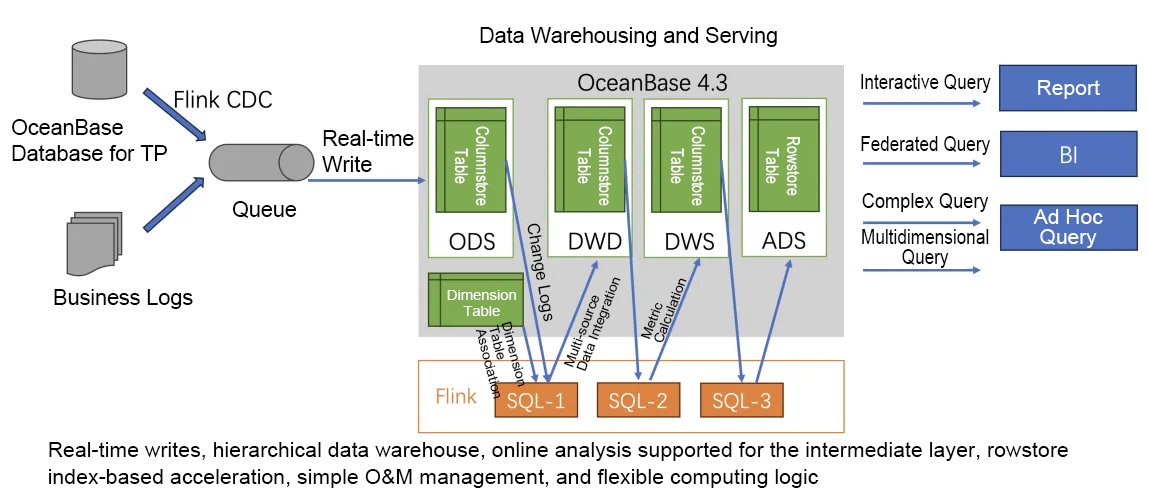
<style>
.page{position:relative;width:1149px;height:501px;background:#ffffff}
.page>*{position:absolute;margin:0}
.t1{font:21.5px "ArialMT";color:#000000}
.t2{font:21.1px "ArialMT";color:#000000;scale:0.82 1}
.t3{font:21.1px "ArialMT";color:#fefefe}
.t4{font:21.5px/26.6px "ArialMT";color:#000000}
.t5{font:17.6px/20.9px "ArialMT";color:#ffffff;scale:0.8 1}
.t6{font:21.1px "ArialMT";color:#000000;scale:0.87 1}
.t7{font:21.1px/20.2px "ArialMT";color:#fefefe}
.t8{font:16.7px "ArialMT";color:#000000}
.t9{font:21.1px/20.3px "ArialMT";color:#000000;scale:0.82 1}
.t10{font:13.3px/13.3px "ArialMT";color:#000000;scale:1.06 1}
.t11{font:13.1px/15.6px "ArialMT";color:#ffffff;scale:1.13 1}
.t12{font:21.4px/27px "ArialMT";color:#000000}
</style>
<div class="page">
<p class="t1" style="left:480px;top:27px;width:297px;height:20px">Data Warehousing and Serving</p>
<p class="t2" style="left:861px;top:74px;width:130px;height:19px">Interactive Query</p>
<p class="t3" style="left:1038px;top:80px;width:62px;height:19px">Report</p>
<p class="t4" style="left:12px;top:119px;width:155px;height:42px">OceanBase<br>Database for TP</p>
<p class="t5" style="left:454px;top:126px;width:36px;height:80px;text-align:center;rotate:90deg">Columnstore<br>Table</p>
<p class="t5" style="left:577px;top:126px;width:36px;height:80px;text-align:center;rotate:90deg">Columnstore<br>Table</p>
<p class="t5" style="left:670px;top:126px;width:36px;height:80px;text-align:center;rotate:90deg">Columnstore<br>Table</p>
<p class="t4" style="left:322px;top:130px;width:92px;height:42px">Real-time<br>Write</p>
<p class="t5" style="left:765px;top:137px;width:35px;height:59px;text-align:center;rotate:90deg">Rowstore<br>Table</p>
<p class="t2" style="left:861px;top:136px;width:129px;height:19px">Federated Query</p>
<p class="t6" style="left:862px;top:193px;width:127px;height:19px">Complex Query</p>
<p class="t1" style="left:232px;top:201px;width:65px;height:17px">Queue</p>
<p class="t7" style="left:1033px;top:209px;width:70px;height:39px;text-align:center">Ad Hoc<br>Query</p>
<p class="t8" style="left:527px;top:223px;width:26px;height:99px;rotate:80deg">Change Logs</p>
<p class="t9" style="left:862px;top:229px;width:127px;height:39px;text-align:center">Multidimensional<br>Query</p>
<p class="t10" style="left:563px;top:277px;width:58px;height:95px;rotate:-69deg">Multi-source<br>Data Integration</p>
<p class="t10" style="left:640px;top:278px;width:47px;height:65px;rotate:-69deg">Metric<br>Calculation</p>
<p class="t1" style="left:54px;top:289px;width:139px;height:20px">Business Logs</p>
<p class="t11" style="left:447px;top:290px;width:69px;height:26px;text-align:center">Dimension<br>Table</p>
<p class="t10" style="left:475px;top:321px;width:50px;height:78px;rotate:75deg">Dimension<br>Table<br>Association</p>
<p class="t12" style="left:49px;top:442px;width:1019px;height:46px">Real-time writes, hierarchical data warehouse, online analysis supported for the intermediate layer, rowstore index-based acceleration, simple O&amp;M management, and flexible computing logic</p>
</div>
